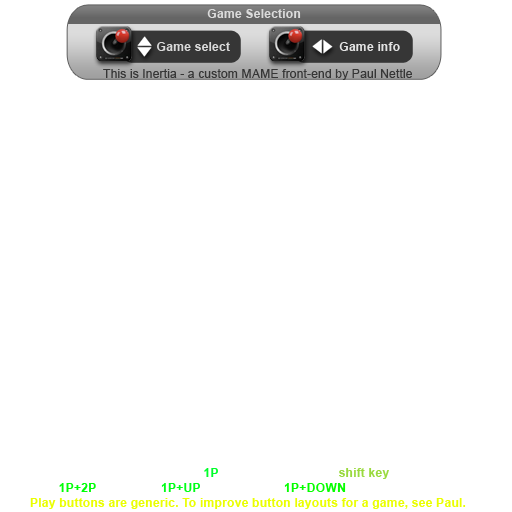
<style>
.page{position:relative;width:512px;height:512px;background:#ffffff}
.page>*{position:absolute;margin:0}
.t1{font:12.5px "Arial-BoldMT";color:#dbdbdb}
.t2{font:12.5px "Arial-BoldMT";color:#d9d9d9}
.t3{font:12.5px "Arial-BoldMT";color:#e2e2e2}
.t4{font:12.4px "ArialMT";color:#363636}
.t5{font:12.5px "Arial-BoldMT";color:#eaff00}
.t6{font:12.5px "Arial-BoldMT";color:#ffffff}
.t7{font:12.5px "Arial-BoldMT";color:#00ff2a}
.t8{font:12.5px "Arial-BoldMT";color:#9ada3f}
.t9{font:12.5px "Arial-BoldMT";color:#00ff06}
.t10{font:12.5px "Arial-BoldMT";color:#00ff18}
.t11{font:12.5px "Arial-BoldMT";color:#06ff00}
</style>
<div class="page">
<p class="t1" style="left:207px;top:9px;width:94px;height:9px">Game Selection</p>
<p class="t2" style="left:157px;top:42px;width:73px;height:9px">Game select</p>
<p class="t3" style="left:339px;top:42px;width:61px;height:9px">Game info</p>
<p class="t4" style="left:103px;top:69px;width:309px;height:11px">This is Inertia - a custom MAME front-end by Paul Nettle</p>
<p class="t5" style="left:30px;top:468px;width:436px;height:41px;text-align:center"><span class="t6">Once in a game, </span><span class="t7">1P</span><span class="t6"> button works like a </span><span class="t8">shift key</span><span class="t6">.<br></span><span class="t9">1P+2P</span><span class="t6"> for credit. </span><span class="t10">1P+UP</span><span class="t6"> to exit game, </span><span class="t11">1P+DOWN</span><span class="t6"> to pause game<br></span>Play buttons are generic. To improve button layouts for a game, see Paul.</p>
</div>
